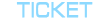
<style>
.page{position:relative;width:111px;height:20px;background:#ffffff}
.page>*{position:absolute;margin:0}
.t1{font:23px "MicrogrammaD-MediExte";letter-spacing:0.075em;color:#8dd9ff;font-weight:bold;scale:0.7 1}
</style>
<div class="page">
<p class="t1" style="left:16px;top:2px;width:77px;height:16px">TICKET</p>
</div>
